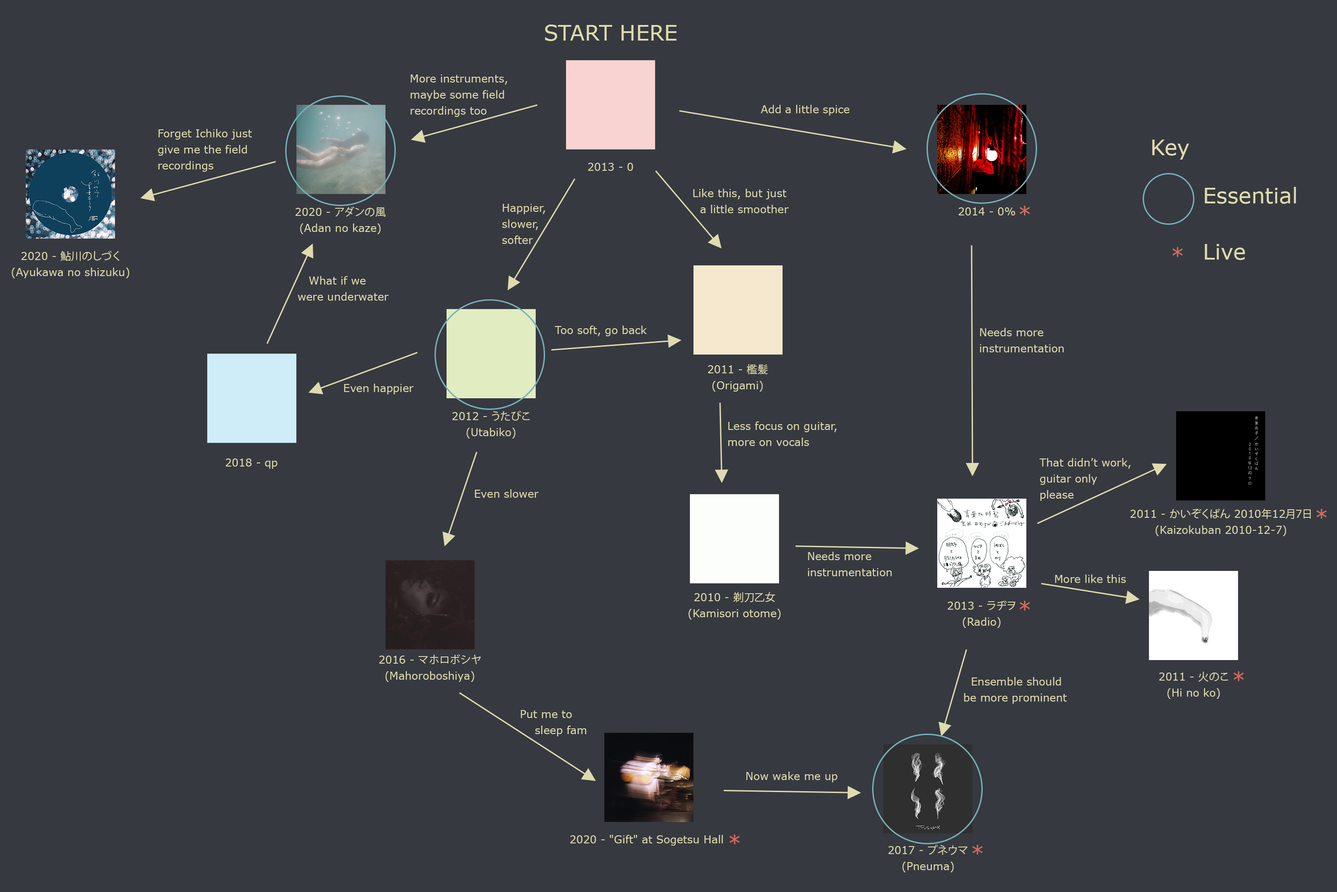
<style>
.page{position:relative;width:1337px;height:892px;background:#36393f}
.page>*{position:absolute;margin:0}
.t1{font:21.4px "Verdana";color:#dfdbae}
.t2{font:10.7px/8px "Verdana";color:#dfdbae}
.t3{font:10.7px "Verdana";color:#dfdbae}
.t4{font:21.4px/8px "Verdana";color:#dfdbae}
.t5{font:10.7px/8px "KozGoPr6N-Regular";color:#dfdbae}
.t6{font:21.4px "Verdana";color:#d66c5b}
</style>
<div class="page">
<p class="t1" style="left:545px;top:25px;width:132px;height:16px">START HERE</p>
<p class="t2" style="left:411px;top:74px;width:97px;height:43px">More instruments,<br><br>maybe some field<br><br>recordings too</p>
<p class="t3" style="left:761px;top:105px;width:89px;height:10px">Add a little spice</p>
<p class="t2" style="left:158px;top:129px;width:94px;height:43px">Forget Ichiko just<br><br>give me the field<br><br>recordings</p>
<p class="t4" style="left:1152px;top:140px;width:144px;height:120px">Key<br><br><br><br><br><br>       Essential<br><br><br><br><br><br><br>       Live</p>
<p class="t3" style="left:588px;top:163px;width:45px;height:8px">2013 - 0</p>
<p class="t2" style="left:693px;top:189px;width:96px;height:24px">Like this, but just<br><br>  a little smoother</p>
<p class="t2" style="left:296px;top:206px;width:90px;height:28px;text-align:center">2020 - <span class="t5">アダンの風</span><br><br>(Adan no kaze)</p>
<p class="t2" style="left:502px;top:204px;width:44px;height:40px">Happier,<br><br>slower,<br><br>softer</p>
<p class="t3" style="left:959px;top:207px;width:57px;height:8px">2014 - 0%</p>
<p class="t6" style="left:1020px;top:206px;width:10px;height:9px">*</p>
<p class="t2" style="left:12px;top:251px;width:117px;height:27px;text-align:center">2020 - <span class="t5">鮎川のしづく</span><br><br>(Ayukawa no shizuku)</p>
<p class="t6" style="left:1173px;top:247px;width:10px;height:10px">*</p>
<p class="t2" style="left:298px;top:276px;width:91px;height:24px">What if we<br><br>were underwater</p>
<p class="t3" style="left:555px;top:325px;width:92px;height:11px">Too soft, go back</p>
<p class="t2" style="left:980px;top:328px;width:84px;height:24px">Needs more<br><br>instrumentation</p>
<p class="t2" style="left:708px;top:364px;width:60px;height:27px;text-align:center">2011 - <span class="t5">檻髪</span><br><br>(Origami)</p>
<p class="t3" style="left:344px;top:383px;width:70px;height:11px">Even happier</p>
<p class="t2" style="left:452px;top:410px;width:78px;height:28px;text-align:center">2012 - <span class="t5">うたびこ</span><br><br>(Utabiko)</p>
<p class="t2" style="left:728px;top:421px;width:109px;height:25px">Less focus on guitar,<br><br>more on vocals</p>
<p class="t3" style="left:226px;top:458px;width:52px;height:11px">2018 - qp</p>
<p class="t2" style="left:1040px;top:458px;width:91px;height:43px">That didn’t work,<br><br>guitar only<br><br>please</p>
<p class="t3" style="left:475px;top:489px;width:64px;height:9px">Even slower</p>
<p class="t2" style="left:1131px;top:508px;width:180px;height:28px;text-align:center">2011 - <span class="t5">かいぞくばん</span> 2010<span class="t5">年</span>12<span class="t5">月</span>7<span class="t5">日</span><br><br>(Kaizokuban 2010-12-7)</p>
<p class="t6" style="left:1317px;top:509px;width:10px;height:9px">*</p>
<p class="t2" style="left:808px;top:551px;width:84px;height:25px">Needs more <br><br>instrumentation</p>
<p class="t3" style="left:1055px;top:574px;width:71px;height:9px">More like this</p>
<p class="t2" style="left:689px;top:592px;width:92px;height:27px;text-align:center">2010 - <span class="t5">剃刀乙女</span><br><br>(Kamisori otome)</p>
<p class="t2" style="left:948px;top:600px;width:68px;height:28px;text-align:center">2013 - <span class="t5">ラヂヲ</span><br><br>(Radio)</p>
<p class="t6" style="left:1020px;top:600px;width:10px;height:10px">*</p>
<p class="t2" style="left:379px;top:654px;width:102px;height:28px;text-align:center">2016 - <span class="t5">マホロボシヤ</span><br><br>(Mahoroboshiya)</p>
<p class="t2" style="left:964px;top:677px;width:103px;height:26px">Ensemble should<br><br>be more prominent</p>
<p class="t2" style="left:1160px;top:671px;width:69px;height:28px;text-align:center">2011 - <span class="t5">火のこ</span><br><br>(Hi no ko)</p>
<p class="t6" style="left:1234px;top:671px;width:10px;height:10px">*</p>
<p class="t2" style="left:521px;top:710px;width:66px;height:26px">Put me to<br><br>    sleep fam</p>
<p class="t3" style="left:746px;top:771px;width:92px;height:11px">Now wake me up</p>
<p class="t3" style="left:570px;top:835px;width:153px;height:10px">2020 - "Gift" at Sogetsu Hall</p>
<p class="t6" style="left:730px;top:834px;width:10px;height:10px">*</p>
<p class="t2" style="left:888px;top:844px;width:80px;height:28px;text-align:center">2017 - <span class="t5">プネウマ</span><br><br>(Pneuma)</p>
<p class="t6" style="left:973px;top:844px;width:10px;height:10px">*</p>
</div>
